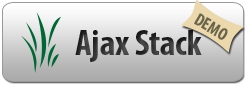
<style>
.page{position:relative;width:246px;height:86px}
.page>*{position:absolute;margin:0}
.t1{font:18px "MyriadPro-BoldCond";color:#6a644a}
.t2{font:36px "MyriadPro-BoldCond";color:#333333}
</style>
<div class="page">
<p class="t1" style="left:194px;top:13px;width:34px;height:27px;rotate:30deg">DEMO</p>
<p class="t2" style="left:75px;top:30px;width:127px;height:32px">Ajax Stack</p>
</div>
